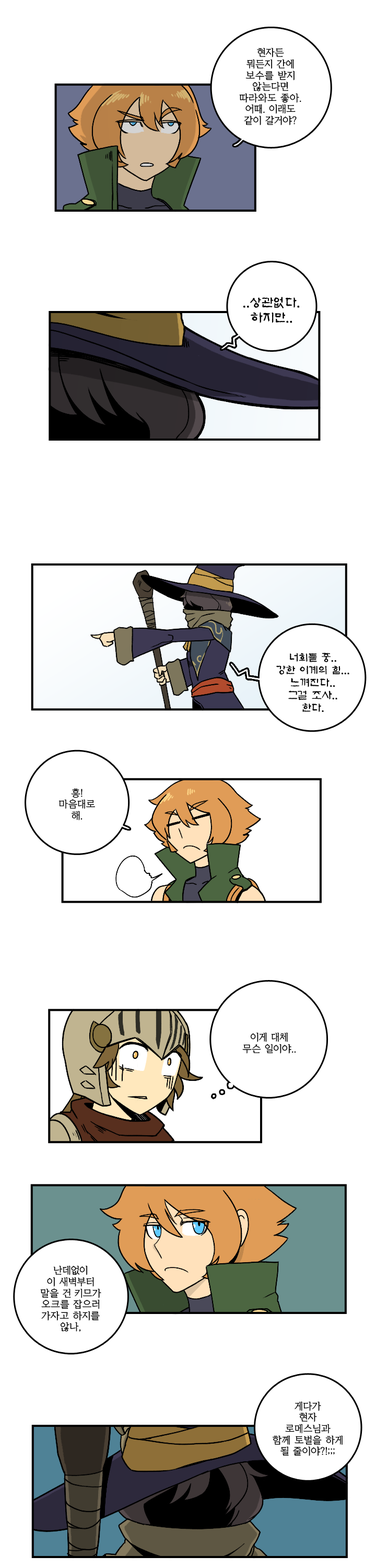
<style>
.page{position:relative;width:376px;height:1568px;background:#ffffff}
.page>*{position:absolute;margin:0}
.t1{font:9.4px "KoreanYMJ-B";color:#000000}
.t2{font:12.5px "KoreanAS-R";color:#000000}
.t3{font:10.5px "KoreanAS-R";color:#000000}
</style>
<div class="page">
<p class="t1" style="left:239px;top:48px;width:63px;height:77px;text-align:center">현자든<br>뭐든지 간에<br>보수를 받지<br>않는다면<br>따라와도 좋아.<br>어때. 이래도<br>같이 갈거야?</p>
<p class="t2" style="left:244px;top:297px;width:56px;height:26px;text-align:center">..상관없다.<br>하지만..</p>
<p class="t3" style="left:276px;top:653px;width:74px;height:59px;text-align:center">너희들 중..<br>강한 이계의 힘...<br>느껴진다..<br>그걸 조사..<br>한다.</p>
<p class="t1" style="left:59px;top:788px;width:36px;height:33px;text-align:center">흥!<br>마음대로<br>해.</p>
<p class="t1" style="left:243px;top:1032px;width:53px;height:22px;text-align:center">이게 대체<br>무슨 일이야..</p>
<p class="t1" style="left:40px;top:1265px;width:61px;height:67px;text-align:center">난데없이<br>이 새벽부터<br>말을 건 키므가<br>오크를 잡으러<br>가자고 하지를<br>않나,</p>
<p class="t1" style="left:273px;top:1401px;width:70px;height:55px;text-align:center">게다가<br>현자<br>로메스님과<br>함께 토벌을 하게<br>될 줄이야?!;;;</p>
</div>
